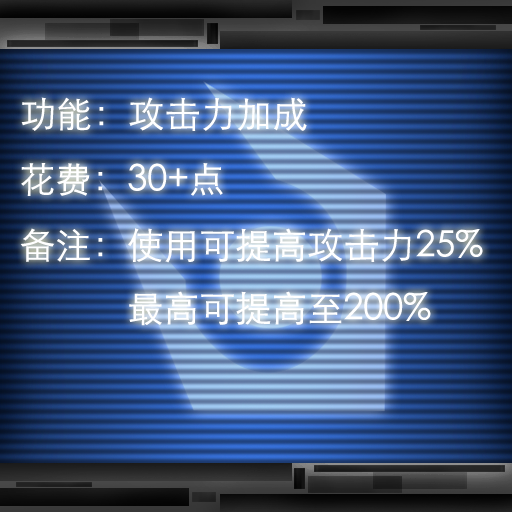
<style>
.page{position:relative;width:512px;height:512px}
.page>*{position:absolute;margin:0}
.t1{font:36px "STXihei";color:#ffffff}
</style>
<div class="page">
<p class="t1" style="left:21px;top:97px;width:286px;height:34px">功能：攻击力加成</p>
<p class="t1" style="left:21px;top:163px;width:202px;height:33px">花费：30+点</p>
<p class="t1" style="left:20px;top:228px;width:463px;height:98px">备注：使用可提高攻击力25%<br>            最高可提高至200%</p>
</div>
